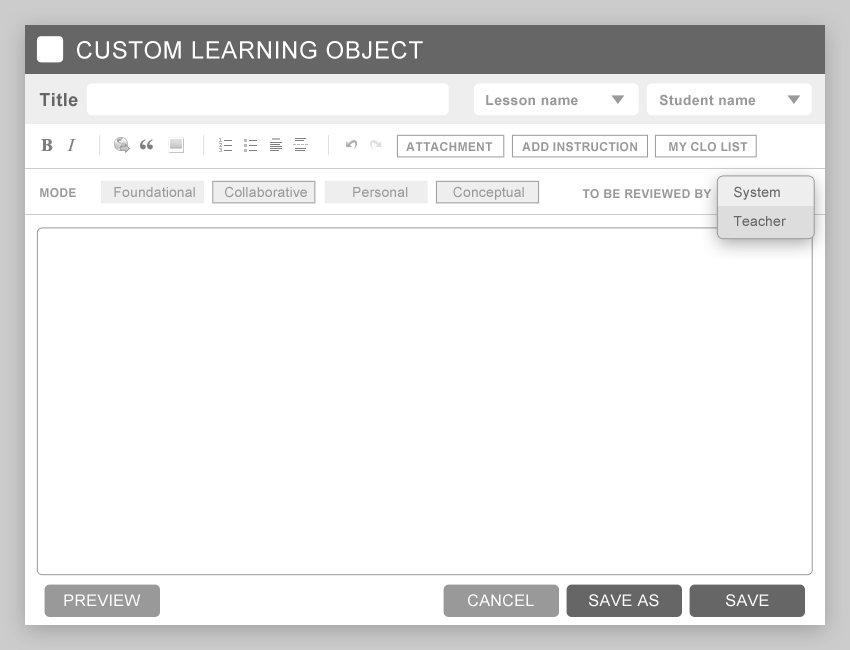
<style>
.page{position:relative;width:850px;height:650px;background:#ffffff}
.page>*{position:absolute;margin:0}
.t1{font:24px "ArialMT";letter-spacing:0.025em;color:#ffffff}
.t2{font:18px "Arial-BoldMT";letter-spacing:0.025em;color:#666666}
.t3{font:14px "Arial-BoldMT";letter-spacing:0.025em;color:#999999}
.t4{font:12px "Arial-BoldMT";letter-spacing:0.025em;color:#999999}
.t5{font:14px "ArialMT";letter-spacing:0.01em;color:#999999}
.t6{font:12px "Arial-BoldMT";letter-spacing:0.025em;color:#999999;text-transform:uppercase}
.t7{font:14px "ArialMT";letter-spacing:0.01em;color:#666666}
.t8{font:16px "ArialMT";letter-spacing:0.025em;color:#ffffff}
</style>
<div class="page">
<p class="t1" style="left:77px;top:41px;width:346px;height:18px">CUSTOM LEARNING OBJECT</p>
<p class="t2" style="left:39px;top:93px;width:39px;height:14px">Title</p>
<p class="t3" style="left:486px;top:95px;width:92px;height:11px">Lesson name</p>
<p class="t3" style="left:659px;top:94px;width:97px;height:12px">Student name</p>
<p class="t4" style="left:406px;top:142px;width:87px;height:9px">ATTACHMENT</p>
<p class="t4" style="left:522px;top:142px;width:115px;height:10px">ADD INSTRUCTION</p>
<p class="t4" style="left:669px;top:142px;width:79px;height:10px">MY CLO LIST</p>
<p class="t4" style="left:40px;top:188px;width:36px;height:10px">MODE</p>
<p class="t5" style="left:114px;top:186px;width:410px;height:14px">Foundational       Collaborative           Personal           Conceptual</p>
<p class="t6" style="left:582px;top:189px;width:130px;height:10px">To be reviewed by</p>
<p class="t7" style="left:734px;top:186px;width:46px;height:14px">System</p>
<p class="t7" style="left:734px;top:186px;width:46px;height:14px">System</p>
<p class="t7" style="left:733px;top:216px;width:53px;height:10px">Teacher</p>
<p class="t8" style="left:64px;top:594px;width:77px;height:12px">PREVIEW</p>
<p class="t8" style="left:468px;top:594px;width:66px;height:13px">CANCEL</p>
<p class="t8" style="left:589px;top:594px;width:70px;height:13px">SAVE AS</p>
<p class="t8" style="left:726px;top:594px;width:43px;height:13px">SAVE</p>
</div>
